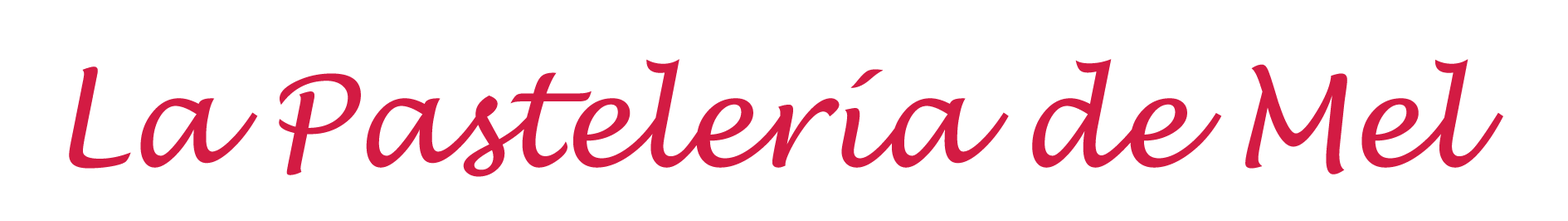
<style>
.page{position:relative;width:1568px;height:221px;background:#ffffff}
.page>*{position:absolute;margin:0}
.t1{font:124.4px "LucidaHandwriting-Italic";color:#d31b43}
</style>
<div class="page">
<p class="t1" style="left:69px;top:59px;width:1434px;height:118px">La Pastelería de Mel</p>
</div>
